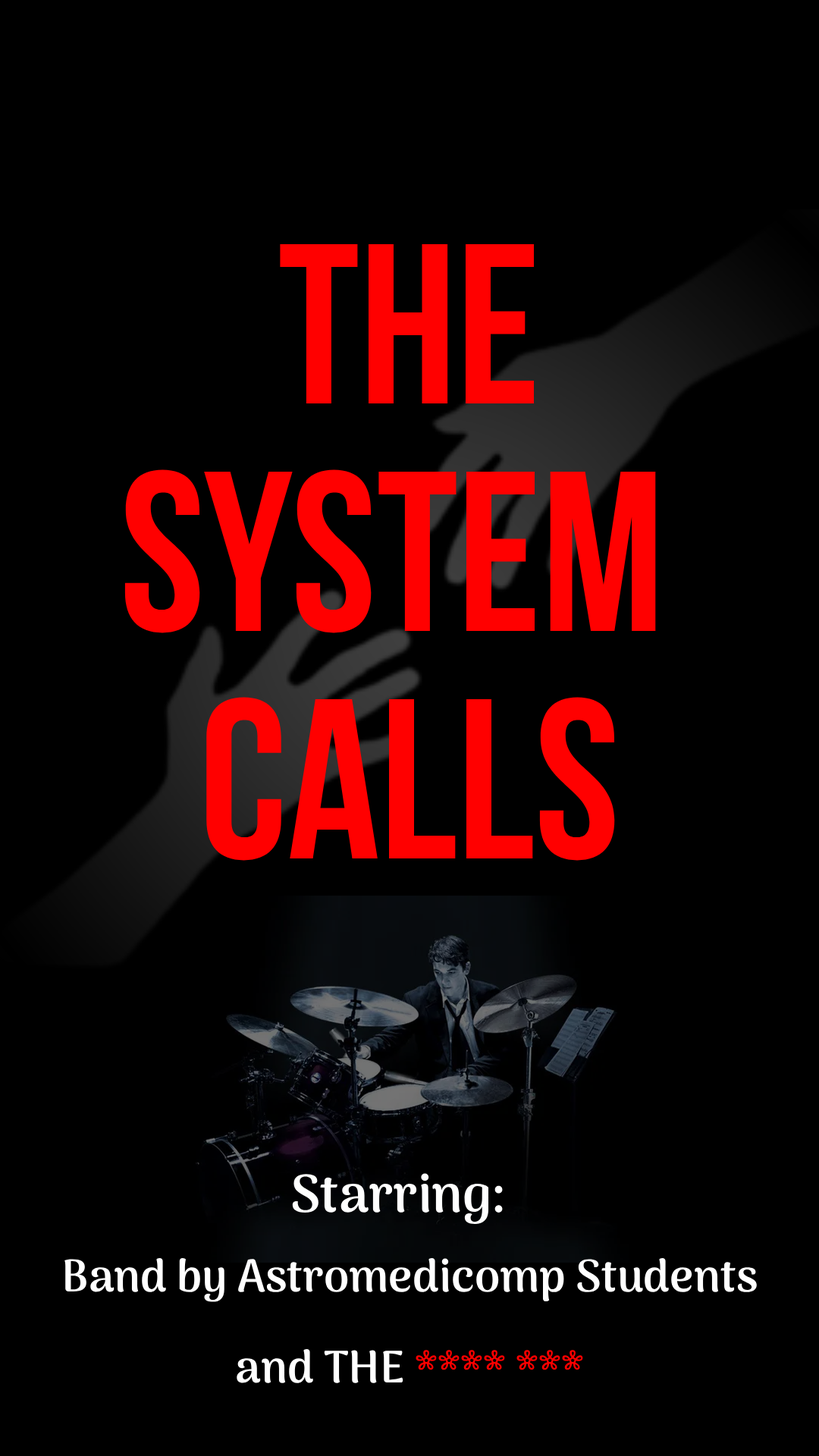
<style>
.page{position:relative;width:819px;height:1456px;background:#000000}
.page>*{position:absolute;margin:0}
.t1{font:227.5px/227.5px "BebasNeueBold";color:#ff0000}
.t2{font:53.1px "ArimaMadurai-Bold";color:#ffffff}
.t3{font:45.5px/91px "ArimaMadurai-Bold";color:#ffffff}
.t4{font:45.5px/91px "ArimaMadurai-Bold";color:#ff0000}
</style>
<div class="page">
<p class="t1" style="left:124px;top:244px;width:532px;height:617px;text-align:center">The<br>SYSTEM <br>CALLS</p>
<p class="t2" style="left:292px;top:1173px;width:211px;height:51px">Starring:</p>
<p class="t3" style="left:64px;top:1258px;width:693px;height:125px;text-align:center">Band by Astromedicomp Students<br>and THE <span class="t4">**** ***</span></p>
</div>
